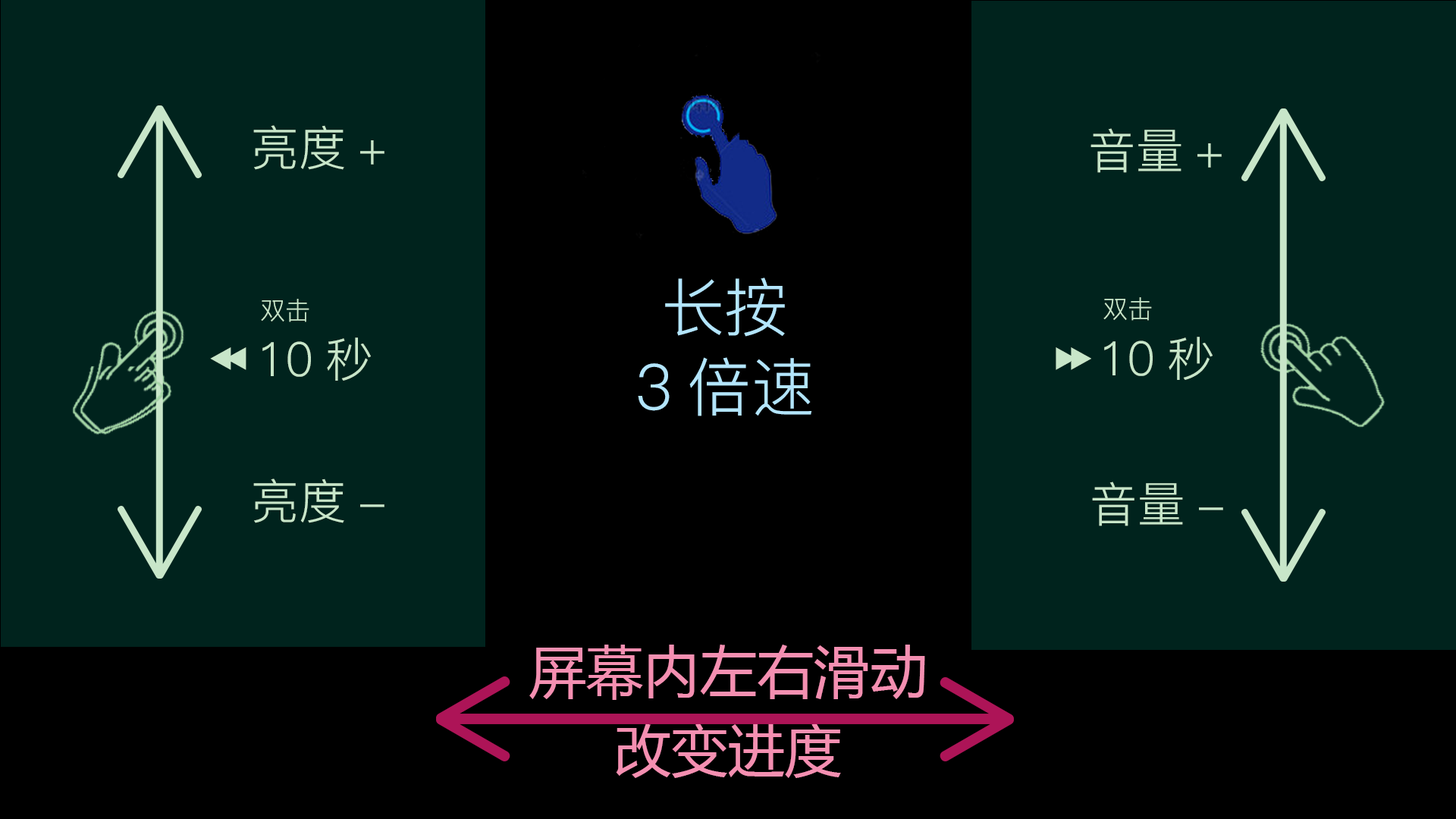
<style>
.page{position:relative;width:1456px;height:819px;background:#00231d}
.page>*{position:absolute;margin:0}
.t1{font:47.4px "PingFang-SC-Regular";color:#c8e6c9}
.t2{font:63.2px/79px "PingFang-SC-Regular";color:#b3e5fc}
.t3{font:25.3px "PingFang-SC-Regular";color:#c8e6c9}
.t4{font:56.9px/79px "MicrosoftYaHei";color:#f48fb1}
</style>
<div class="page">
<p class="t1" style="left:253px;top:125px;width:131px;height:45px">亮度+</p>
<p class="t1" style="left:1090px;top:128px;width:132px;height:45px">音量+</p>
<p class="t2" style="left:638px;top:278px;width:174px;height:138px;text-align:center">长按<br>3倍速</p>
<p class="t3" style="left:261px;top:299px;width:48px;height:23px">双击</p>
<p class="t3" style="left:1103px;top:297px;width:49px;height:24px">双击</p>
<p class="t1" style="left:262px;top:337px;width:109px;height:44px">10秒</p>
<p class="t1" style="left:1104px;top:337px;width:109px;height:43px">10秒</p>
<p class="t1" style="left:253px;top:479px;width:131px;height:44px">亮度-</p>
<p class="t1" style="left:1092px;top:482px;width:131px;height:44px">音量-</p>
<p class="t4" style="left:529px;top:645px;width:396px;height:133px;text-align:center">屏幕内左右滑动<br>改变进度</p>
</div>
